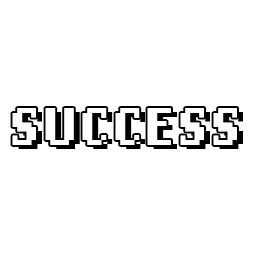
<style>
.page{position:relative;width:256px;height:256px;background:#ffffff}
.page>*{position:absolute;margin:0}
.t1{font:56px "LoRes12OT-Bold";color:#fefefe}
.t2{font:56px "LoRes12OT-Bold"}
</style>
<div class="page">
<p class="t1" style="left:12px;top:108px;width:225px;height:37px">SUCCESS</p>
<p class="t2" style="left:18px;top:112px;width:225px;height:37px">SUCCESS</p>
</div>
